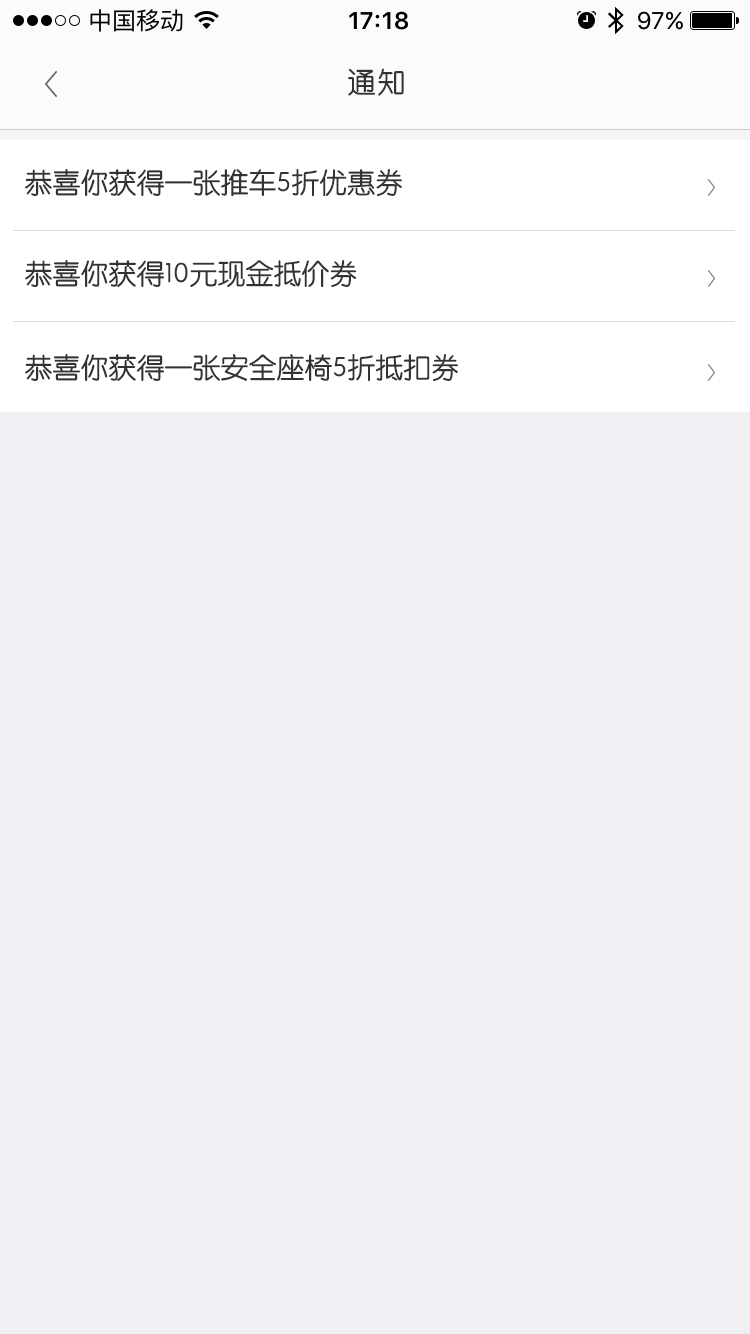
<style>
.page{position:relative;width:750px;height:1334px;background:#efeff4}
.page>*{position:absolute;margin:0}
.t1{font:28px "STYuanti-SC-Regular";letter-spacing:0.075em;color:#333333}
.t2{font:28px "STYuanti-SC-Regular";color:#333333}
</style>
<div class="page">
<p class="t1" style="left:348px;top:68px;width:56px;height:28px">通知</p>
<p class="t2" style="left:25px;top:169px;width:377px;height:27px">恭喜你获得一张推车5折优惠券</p>
<p class="t2" style="left:25px;top:260px;width:332px;height:27px">恭喜你获得10元现金抵价券</p>
<p class="t2" style="left:25px;top:354px;width:433px;height:27px">恭喜你获得一张安全座椅5折抵扣券</p>
</div>
